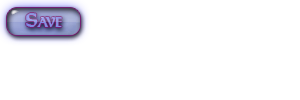
<style>
.page{position:relative;width:300px;height:100px;background:#ffffff}
.page>*{position:absolute;margin:0}
.t1{font:20px "LHFUncialCaps";color:#9199e6;font-variant:small-caps}
</style>
<div class="page">
<p class="t1" style="left:26px;top:13px;width:36px;height:14px">Save</p>
</div>
